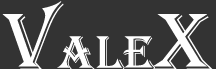
<style>
.page{position:relative;width:216px;height:69px;background:#333333}
.page>*{position:absolute;margin:0}
.t1{font:50px "Algerian";letter-spacing:0.01em;color:#fefefe}
.t2{font:83.3px "Algerian";letter-spacing:0.01em;color:#fefefe}
</style>
<div class="page">
<p class="t1" style="left:2px;top:1px;width:211px;height:69px"><span class="t2">V</span>ale<span class="t2">x</span></p>
</div>
